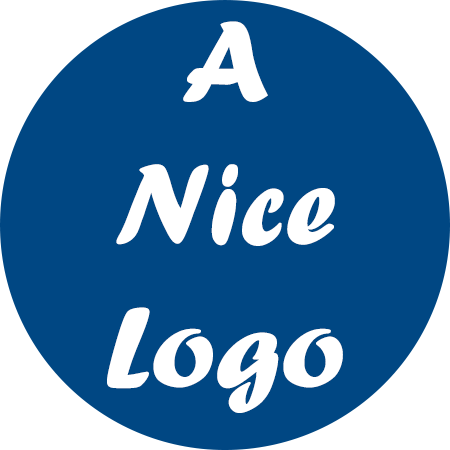
<style>
.page{position:relative;width:450px;height:450px;background:#004783}
.page>*{position:absolute;margin:0}
.t1{font:119px "ForteMT";color:#ffffff}
</style>
<div class="page">
<p class="t1" style="left:107px;top:21px;width:236px;height:392px;text-align:center">A<br>Nice<br>Logo</p>
</div>
